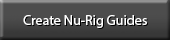
<style>
.page{position:relative;width:170px;height:40px;background:#4d4d4d}
.page>*{position:absolute;margin:0}
.t1{font:14px "MyriadPro-Regular";color:#ffffff}
</style>
<div class="page">
<p class="t1" style="left:23px;top:15px;width:124px;height:13px">Create Nu-Rig Guides</p>
</div>
